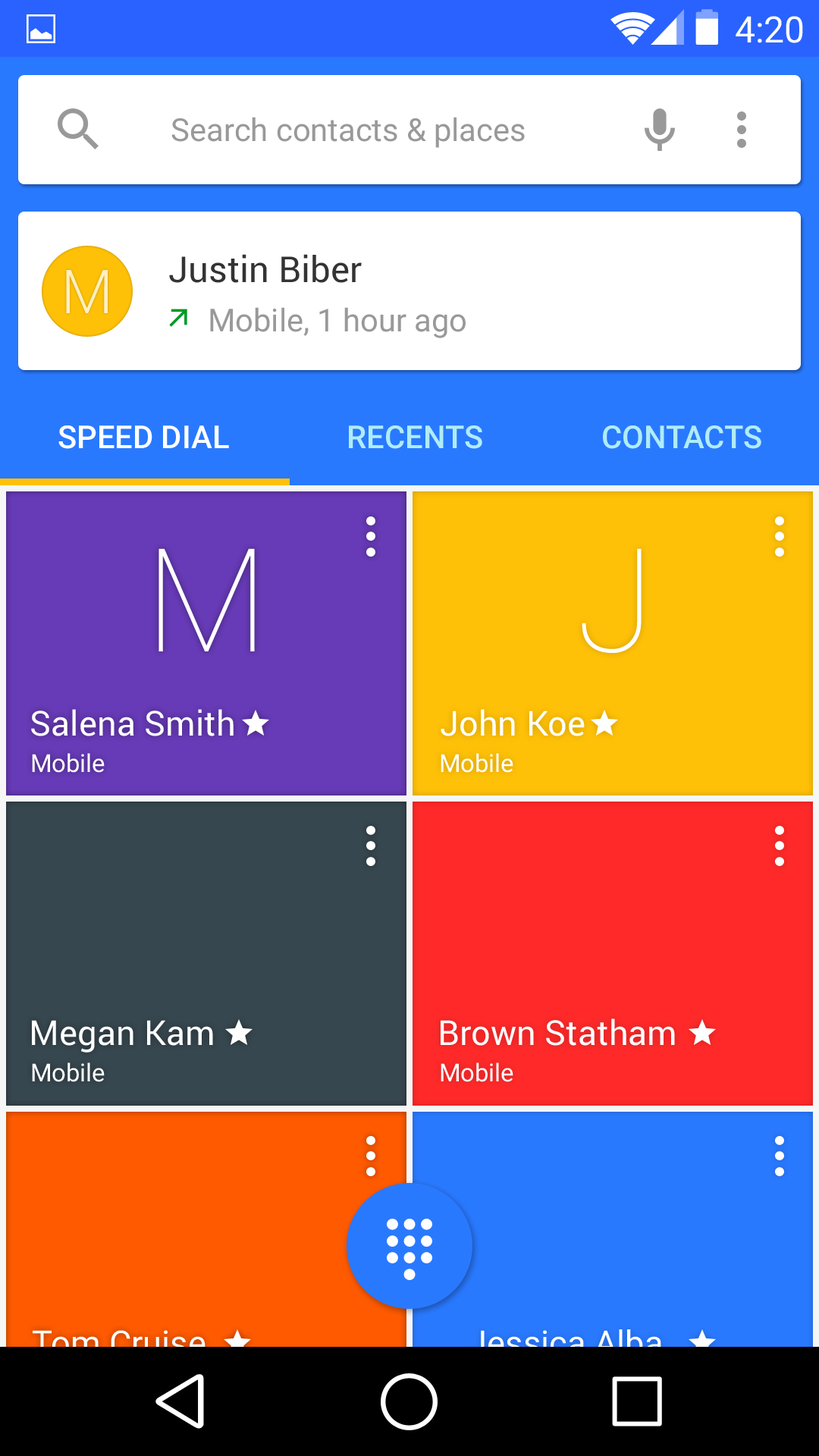
<style>
.page{position:relative;width:819px;height:1456px}
.page>*{position:absolute;margin:0}
.t1{font:36.4px "Roboto-Regular";color:#ffffff}
.t2{font:31.6px "Roboto-Regular";color:#999999}
.t3{font:35.9px "Roboto-Regular";color:#333333}
.t4{font:60.7px "Roboto-Light";color:#ffefc1}
.t5{font:31.6px "Roboto-Medium";color:#ffffff}
.t6{font:31.6px "Roboto-Medium";color:#b0ecf7}
.t7{font:144.1px "Roboto-Thin";color:#ffffff}
.t8{font:34.4px "Roboto-Regular";color:#ffffff}
.t9{font:24.8px "Roboto-Regular";color:#ffffff}
.t10{font:34.4px "Roboto-Regular"}
</style>
<div class="page">
<p class="t1" style="left:736px;top:16px;width:67px;height:27px">4:20</p>
<p class="t2" style="left:171px;top:117px;width:354px;height:31px">Search contacts &amp; places</p>
<p class="t3" style="left:169px;top:254px;width:193px;height:29px">Justin Biber</p>
<p class="t4" style="left:66px;top:270px;width:42px;height:43px">M</p>
<p class="t2" style="left:210px;top:307px;width:256px;height:31px">Mobile, 1 hour ago</p>
<p class="t5" style="left:58px;top:425px;width:171px;height:24px">SPEED DIAL</p>
<p class="t6" style="left:349px;top:425px;width:133px;height:24px">RECENTS</p>
<p class="t6" style="left:603px;top:425px;width:158px;height:24px">CONTACTS</p>
<p class="t7" style="left:158px;top:548px;width:97px;height:103px">M</p>
<p class="t7" style="left:582px;top:548px;width:60px;height:105px">J</p>
<p class="t8" style="left:31px;top:709px;width:203px;height:27px">Salena Smith</p>
<p class="t8" style="left:441px;top:709px;width:144px;height:27px">John Koe</p>
<p class="t9" style="left:32px;top:753px;width:73px;height:20px">Mobile</p>
<p class="t9" style="left:441px;top:753px;width:72px;height:20px">Mobile</p>
<p class="t8" style="left:32px;top:1020px;width:181px;height:33px">Megan Kam</p>
<p class="t8" style="left:441px;top:1018px;width:234px;height:28px">Brown Statham</p>
<p class="t9" style="left:32px;top:1062px;width:73px;height:20px">Mobile</p>
<p class="t9" style="left:441px;top:1062px;width:72px;height:20px">Mobile</p>
<p class="t8" style="left:33px;top:1330px;width:173px;height:26px">Tom Cruise</p>
<p class="t10" style="left:469px;top:1329px;width:193px;height:27px">Jessica Alba</p>
</div>
